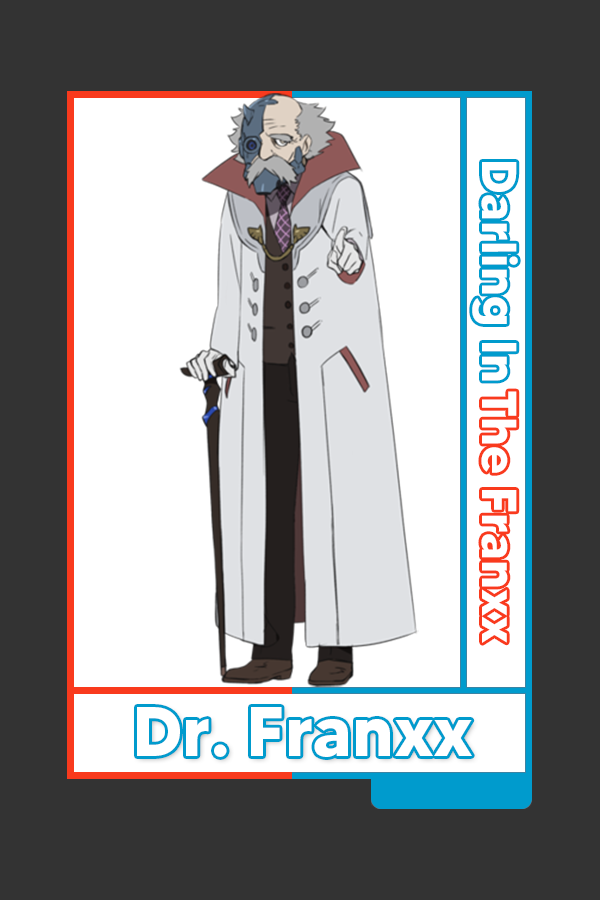
<style>
.page{position:relative;width:600px;height:900px;background:#333333}
.page>*{position:absolute;margin:0}
.t1{font:48.8px "MADETOMMY-Bold";color:#ffffff}
.t2{font:70.1px "MADETOMMY-Bold";color:#ffffff}
</style>
<div class="page">
<p class="t1" style="left:472px;top:162px;width:46px;height:219px;rotate:90deg">Darling In</p>
<p class="t1" style="left:481px;top:391px;width:36px;height:252px;rotate:90deg">The Franxx</p>
<p class="t2" style="left:137px;top:707px;width:335px;height:50px">Dr. Franxx</p>
</div>
